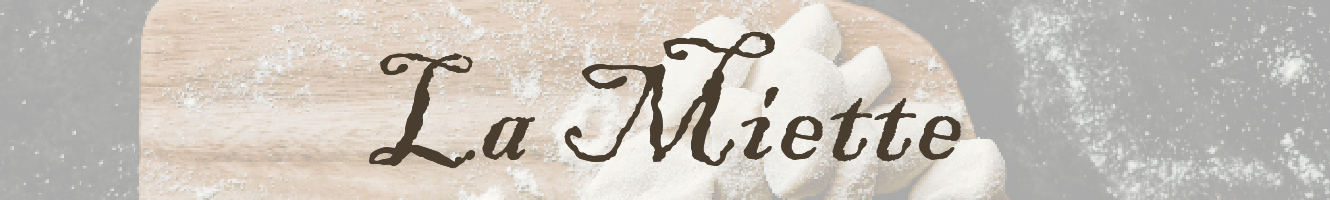
<style>
.page{position:relative;width:1330px;height:200px}
.page>*{position:absolute;margin:0}
.t1{font:150px "BlackadderITC-Regular";letter-spacing:0.02em;color:#483d2e}
</style>
<div class="page">
<p class="t1" style="left:369px;top:32px;width:592px;height:137px">La Miette</p>
</div>
